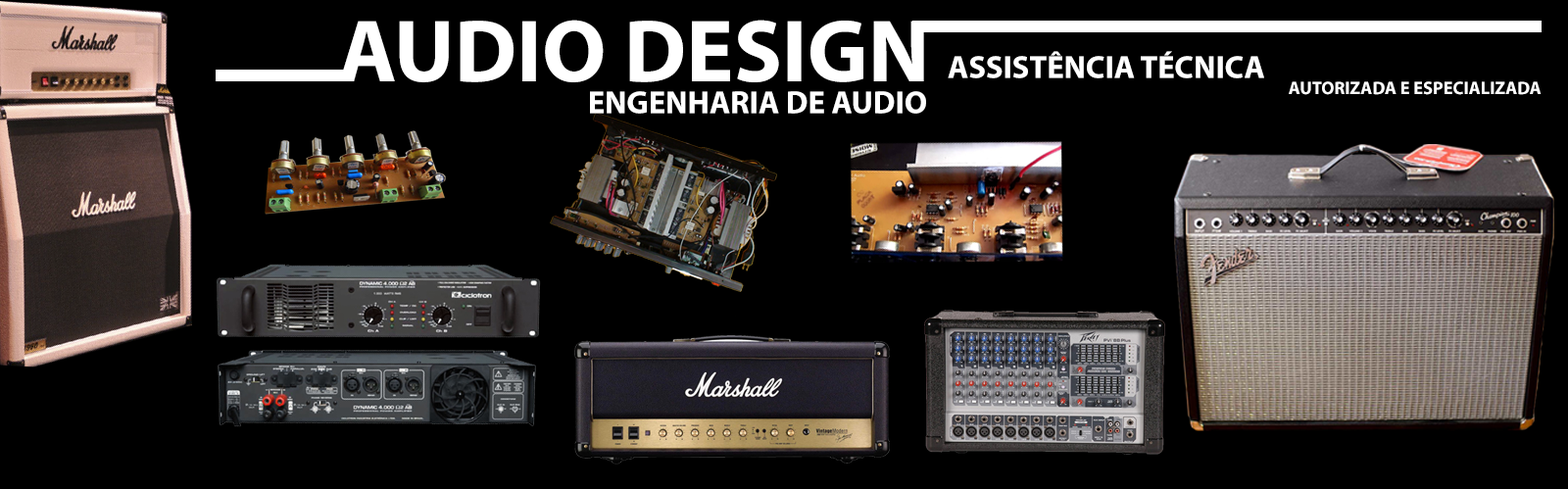
<style>
.page{position:relative;width:1568px;height:489px;background:#000000}
.page>*{position:absolute;margin:0}
.t1{font:89.2px "MyriadPro-Bold";color:#ffffff;text-transform:uppercase}
.t2{font:31.9px "MyriadPro-Bold";color:#ffffff;text-transform:uppercase}
.t3{font:18px "MyriadPro-Bold";color:#ffffff;text-transform:uppercase}
</style>
<div class="page">
<p class="t1" style="left:339px;top:20px;width:585px;height:62px">AUDIO DESIGN</p>
<p class="t2" style="left:948px;top:51px;width:316px;height:27px">ASSISTÊNCIA TÉCNICA</p>
<p class="t3" style="left:1289px;top:81px;width:253px;height:14px">AUTORIZADA E ESPECIALIZADA</p>
<p class="t2" style="left:590px;top:91px;width:336px;height:23px">ENGENHARIA DE AUDIO</p>
</div>
